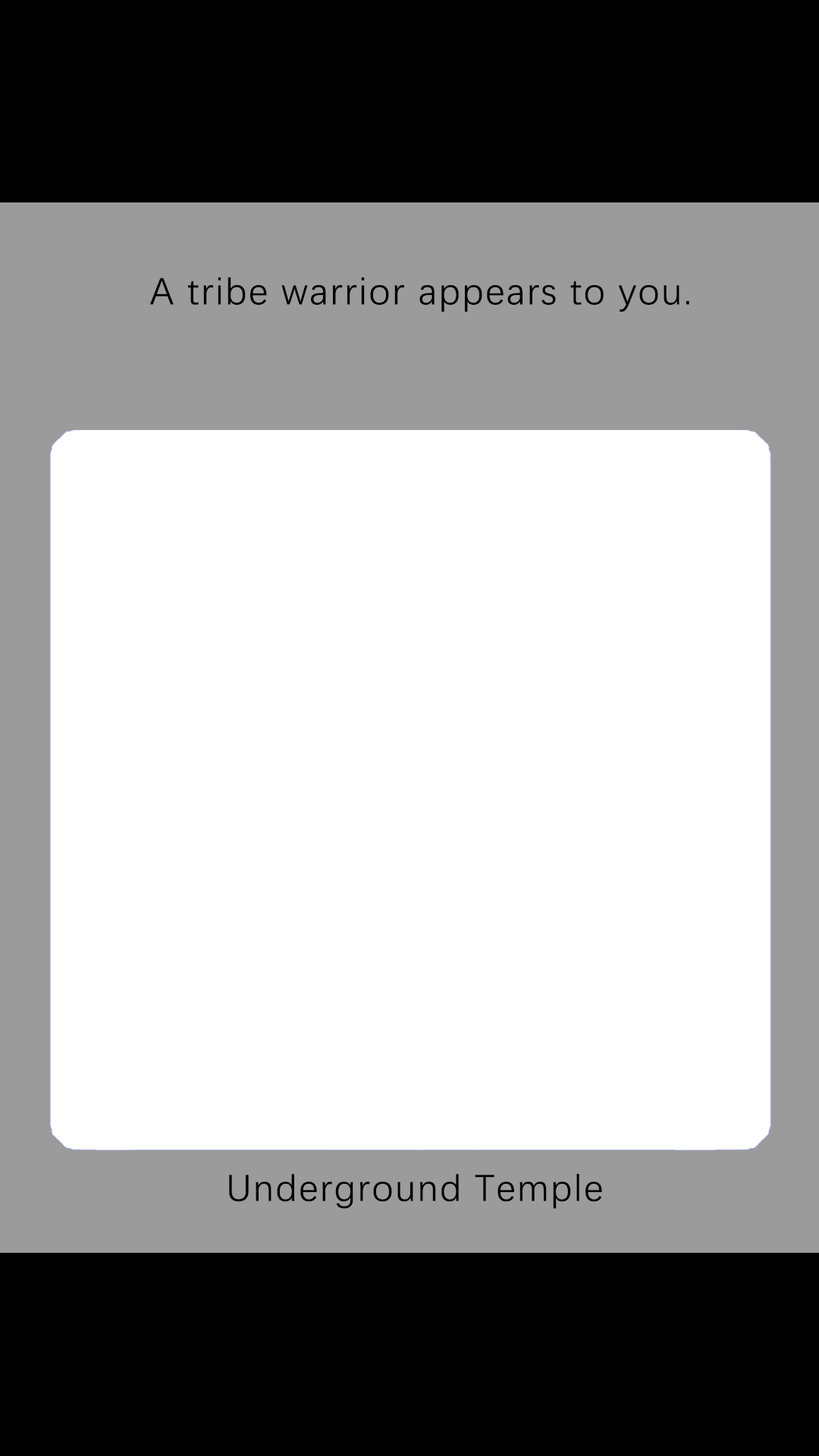
<style>
.page{position:relative;width:819px;height:1456px;background:#ffffff}
.page>*{position:absolute;margin:0}
.t1{font:37.9px "DengXian-Regular";letter-spacing:0.04em;color:#000000}
</style>
<div class="page">
<p class="t1" style="left:150px;top:277px;width:539px;height:35px">A tribe warrior appears to you.</p>
<p class="t1" style="left:229px;top:1174px;width:373px;height:35px">Underground Temple</p>
</div>
